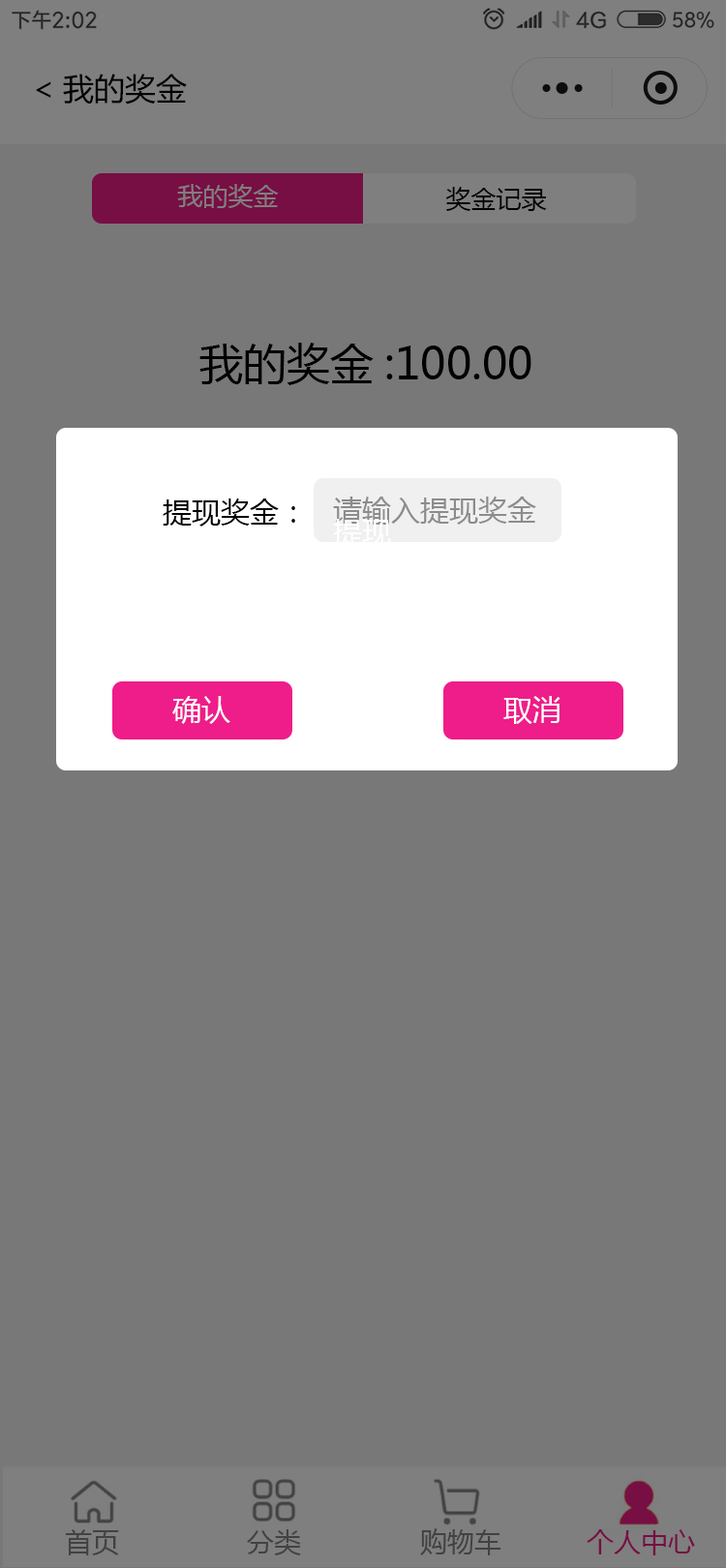
<style>
.page{position:relative;width:726px;height:1568px;background:#787878}
.page>*{position:absolute;margin:0}
.t1{font:31px "MicrosoftYaHei";color:#000000}
.t2{font:25.2px "MicrosoftYaHei";color:#7f7f7f}
.t3{font:25.2px "MicrosoftYaHei";color:#000000}
.t4{font:43.6px "MicrosoftYaHei";color:#000000}
.t5{font:29px "MicrosoftYaHei";color:#8c8c8c}
.t6{font:29px "MicrosoftYaHei";color:#000000}
.t7{font:29px "MicrosoftYaHei";color:#ffffff}
</style>
<div class="page">
<p class="t1" style="left:36px;top:74px;width:151px;height:31px">&lt;我的奖金</p>
<p class="t2" style="left:177px;top:184px;width:102px;height:24px">我的奖金</p>
<p class="t3" style="left:445px;top:187px;width:102px;height:24px">奖金记录</p>
<p class="t4" style="left:199px;top:343px;width:332px;height:42px">我的奖金:100.00</p>
<p class="t5" style="left:333px;top:497px;width:203px;height:28px">请输入提现奖金</p>
<p class="t6" style="left:163px;top:498px;width:132px;height:29px">提现奖金：</p>
<p class="t7" style="left:333px;top:519px;width:58px;height:27px">提现</p>
<p class="t7" style="left:172px;top:696px;width:58px;height:28px">确认</p>
<p class="t7" style="left:503px;top:696px;width:57px;height:28px">取消</p>
</div>
